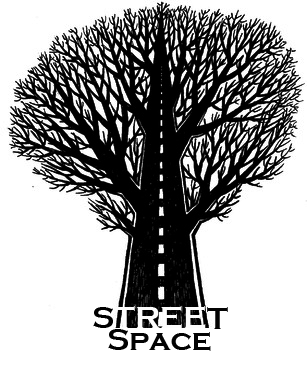
<style>
.page{position:relative;width:307px;height:376px;background:#ffffff}
.page>*{position:absolute;margin:0}
.t1{font:30.6px "CopperplateGothic-Bold";color:#000000}
.t2{font:30.6px "CopperplateGothic-Bold";color:#fcfcfc}
.t3{font:30.6px "CopperplateGothic-Bold";color:#030303}
</style>
<div class="page">
<p class="t1" style="left:93px;top:307px;width:20px;height:21px">S</p>
<p class="t2" style="left:114px;top:306px;width:92px;height:23px">TREE</p>
<p class="t3" style="left:207px;top:307px;width:21px;height:22px">T</p>
<p class="t3" style="left:108px;top:329px;width:103px;height:22px">Space</p>
</div>
